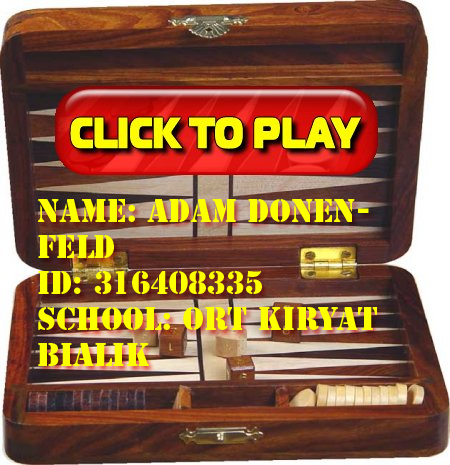
<style>
.page{position:relative;width:450px;height:465px}
.page>*{position:absolute;margin:0}
.t1{font:30px "StencilStd";color:#fcff00}
</style>
<div class="page">
<p class="t1" style="left:37px;top:199px;width:340px;height:167px">Name: Adam Donenfeld<br>ID: 316408335<br>School: Ort Kiryat Bialik</p>
</div>
